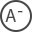
<style>
.page{position:relative;width:32px;height:32px;background:#ffffff}
.page>*{position:absolute;margin:0}
.t1{font:18.7px "MyriadPro-Regular";color:#464646}
</style>
<div class="page">
<p class="t1" style="left:5px;top:9px;width:11px;height:13px">A</p>
<p class="t1" style="left:18px;top:11px;width:5px;height:2px">-</p>
</div>
